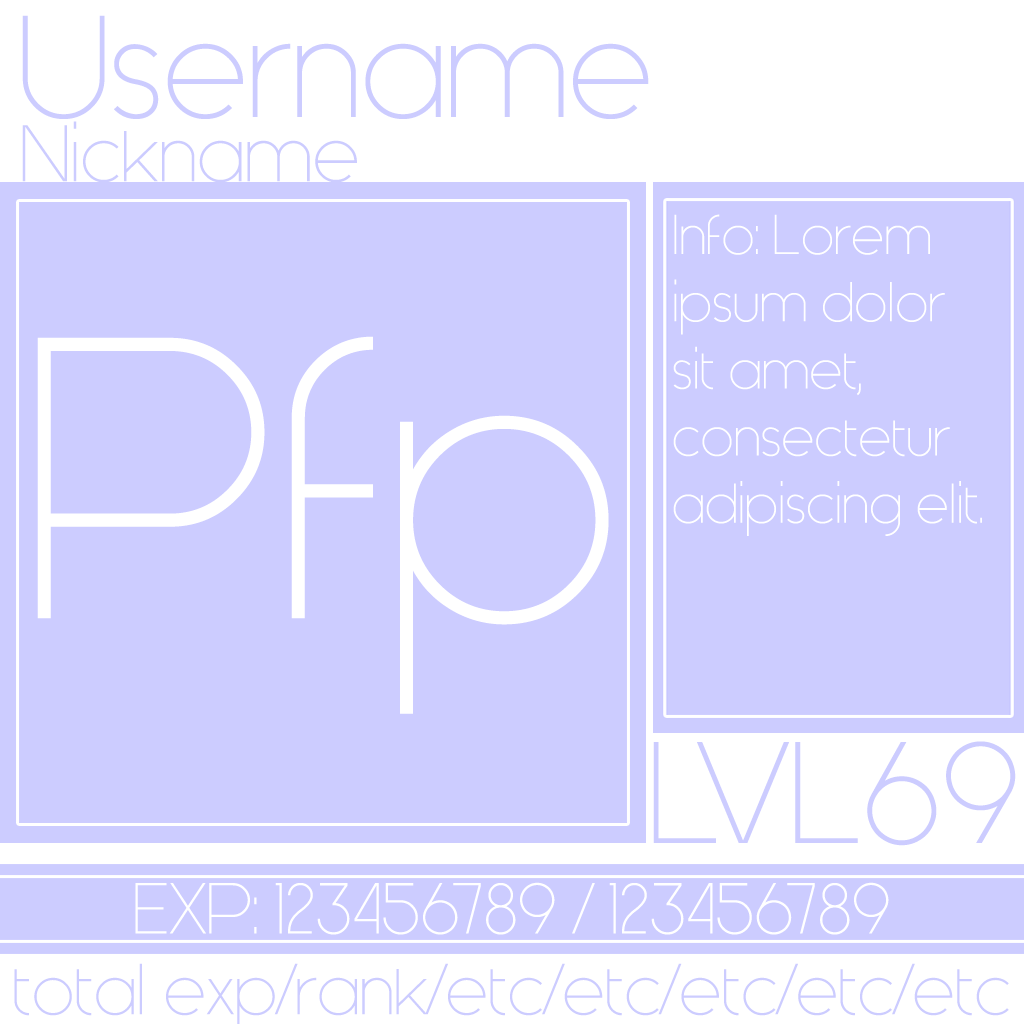
<style>
.page{position:relative;width:1024px;height:1024px;background:#ccccff}
.page>*{position:absolute;margin:0}
.t1{font:144px "Generica";color:#ccccff}
.t2{font:80px "Generica";color:#ccccff}
.t3{font:56px "Generica";color:#ffffff}
.t4{font:56px/170px "Generica";color:#ffffff}
.t5{font:400px "Generica";color:#ffffff}
.t6{font:72px "Generica";color:#ffffff}
</style>
<div class="page">
<p class="t1" style="left:22px;top:15px;width:627px;height:104px">Username</p>
<p class="t2" style="left:22px;top:121px;width:335px;height:62px">Nickname</p>
<p class="t3" style="left:673px;top:214px;width:309px;height:322px"><span class="t4">Info: Lorem</span><br>ipsum dolor<br>sit amet, <br>consectetur <br>adipiscing elit.</p>
<p class="t5" style="left:37px;top:336px;width:572px;height:378px">Pfp</p>
<p class="t1" style="left:653px;top:741px;width:363px;height:105px">LVL69</p>
<p class="t6" style="left:135px;top:882px;width:754px;height:53px">EXP: 123456789 / 123456789</p>
</div>
